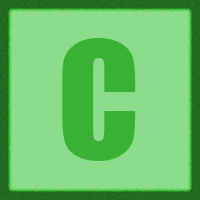
<style>
.page{position:relative;width:200px;height:200px;background:#8ddc8b}
.page>*{position:absolute;margin:0}
.t1{font:150px "Impact";color:#38b135}
</style>
<div class="page">
<p class="t1" style="left:62px;top:38px;width:74px;height:123px">C</p>
</div>
